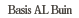
<style>
.page{position:relative;width:79px;height:18px;background:#ffffff}
.page>*{position:absolute;margin:0}
.t1{font:12px "RyuminPro-ExBold";letter-spacing:-0.08em;color:#4c4843;scale:0.9 1}
</style>
<div class="page">
<p class="t1" style="left:7px;top:5px;width:65px;height:10px">Basis AL Buin</p>
</div>
